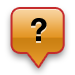
<style>
.page{position:relative;width:75px;height:75px;background:#ffffff}
.page>*{position:absolute;margin:0}
.t1{font:31.3px "HelveticaNeue-Bold";color:#000000}
</style>
<div class="page">
<p class="t1" style="left:31px;top:18px;width:16px;height:23px">?</p>
</div>
